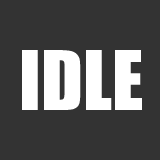
<style>
.page{position:relative;width:160px;height:160px;background:#333333}
.page>*{position:absolute;margin:0}
.t1{font:76px "Impact";color:#ffffff;text-transform:uppercase}
</style>
<div class="page">
<p class="t1" style="left:22px;top:50px;width:120px;height:60px">IDLE</p>
</div>
